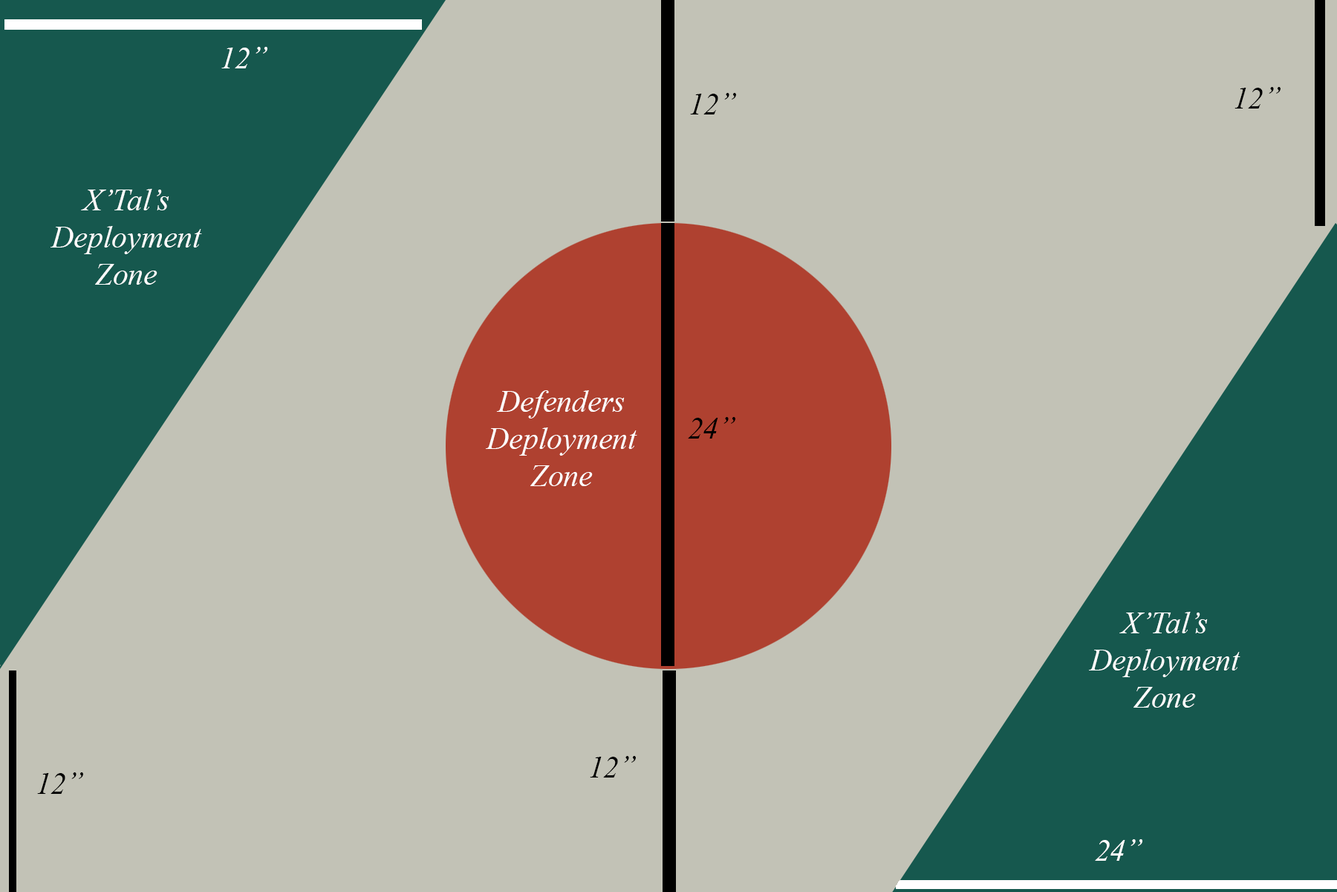
<style>
.page{position:relative;width:1337px;height:892px;background:#c2c2b6}
.page>*{position:absolute;margin:0}
.t1{font:31px "TimesNewRomanPS-ItalicMT";color:#ffffff}
.t2{font:31px "TimesNewRomanPS-ItalicMT";color:#000000}
</style>
<div class="page">
<p class="t1" style="left:221px;top:47px;width:46px;height:21px">12”</p>
<p class="t2" style="left:1235px;top:87px;width:46px;height:21px">12”</p>
<p class="t2" style="left:690px;top:93px;width:46px;height:21px">12”</p>
<p class="t1" style="left:51px;top:189px;width:151px;height:96px;text-align:center">X’Tal’s<br>Deployment<br>Zone</p>
<p class="t1" style="left:486px;top:390px;width:151px;height:96px;text-align:center">Defenders<br>Deployment<br>Zone</p>
<p class="t2" style="left:688px;top:417px;width:48px;height:21px">24”</p>
<p class="t1" style="left:1089px;top:611px;width:152px;height:96px;text-align:center">X’Tal’s<br>Deployment<br>Zone</p>
<p class="t2" style="left:590px;top:756px;width:46px;height:21px">12”</p>
<p class="t2" style="left:37px;top:772px;width:46px;height:22px">12”</p>
<p class="t1" style="left:1095px;top:839px;width:48px;height:21px">24”</p>
</div>
